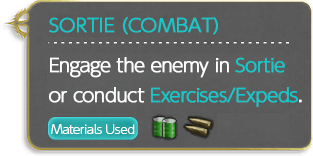
<style>
.page{position:relative;width:313px;height:156px}
.page>*{position:absolute;margin:0}
.t1{font:18px/40px "UDShinGoPro-Light";letter-spacing:-0.04em;color:#ffffff;font-weight:bold}
.t2{font:18px/40px "UDShinGoPro-Light";color:#14c9cb;font-weight:bold}
.t3{font:18px/40px "UDShinGoPro-Light";letter-spacing:-0.04em;color:#14c9cb;font-weight:bold}
.t4{font:18px/30px "UDShinGoPro-Light";letter-spacing:-0.04em;color:#ffffff;font-weight:bold}
.t5{font:18px/30px "UDShinGoPro-Light";letter-spacing:-0.04em;color:#14c9cb;font-weight:bold}
.t6{font:12px "UDShinGoPro-Light";letter-spacing:-0.04em;color:#ffffff}
</style>
<div class="page">
<p class="t1" style="left:49px;top:17px;width:253px;height:90px"><span class="t2">SORTIE (COMBAT)<br></span>Engage the enemy in <span class="t3">Sortie<br></span><span class="t4">or conduct </span><span class="t5">Exercises/Expeds</span><span class="t4">.</span></p>
<p class="t6" style="left:51px;top:124px;width:84px;height:10px">Materials Used</p>
</div>
